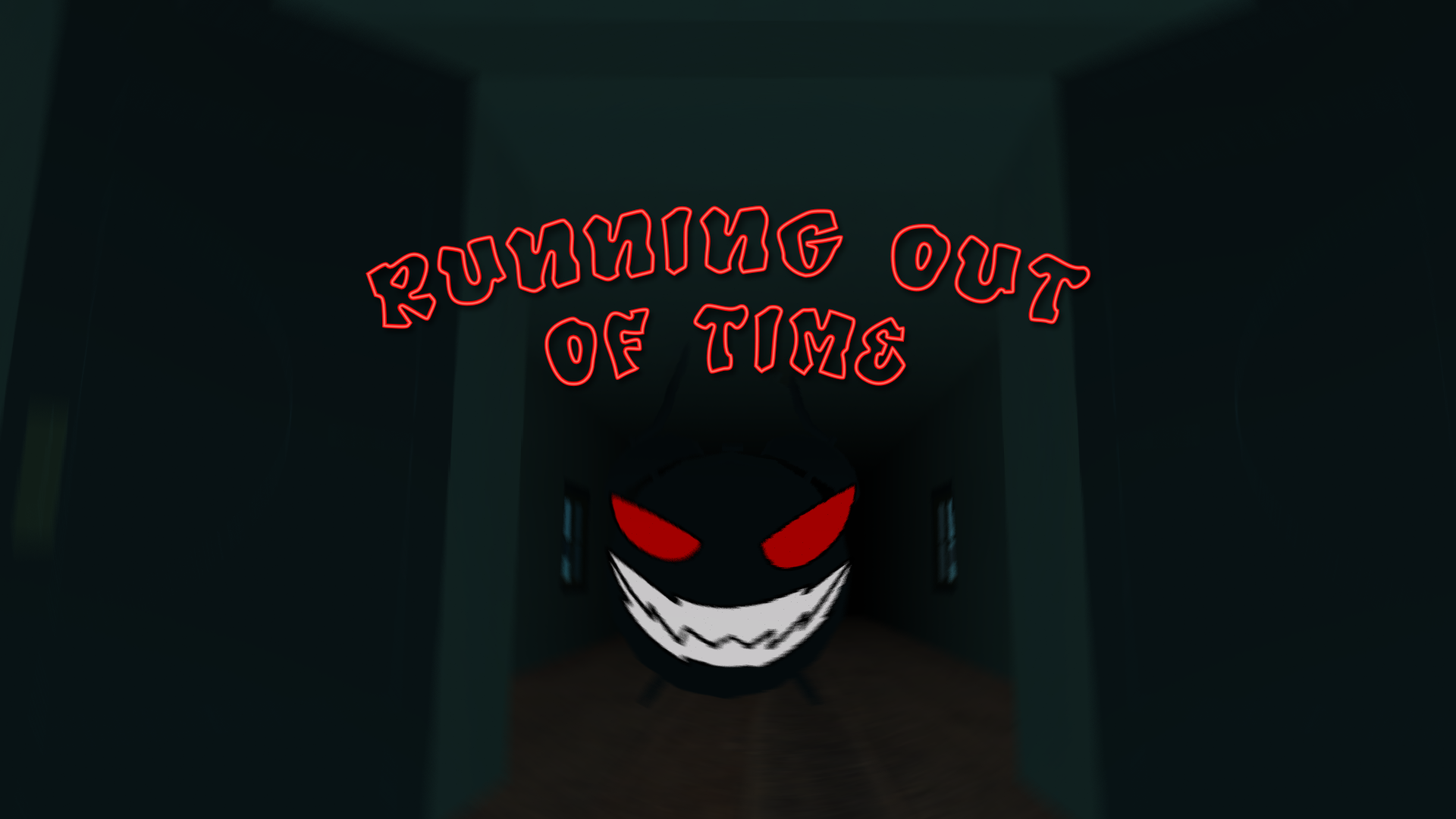
<style>
.page{position:relative;width:1456px;height:819px}
.page>*{position:absolute;margin:0}
.t1{font:100.5px/98.7px "GrafiteRegular";letter-spacing:0.05em}
</style>
<div class="page">
<p class="t1" style="left:366px;top:206px;width:725px;height:181px;text-align:center">RUNNING OUT<br>OF TIME</p>
</div>
